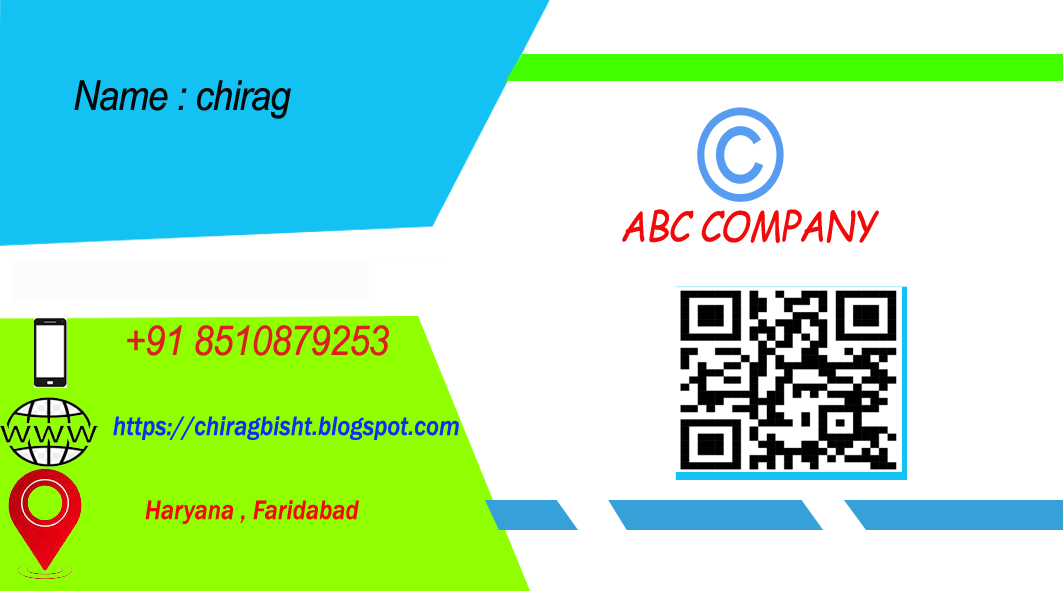
<style>
.page{position:relative;width:1063px;height:591px;background:#ffffff}
.page>*{position:absolute;margin:0}
.t1{font:41.2px "Arial-ItalicMT";letter-spacing:-0.025em;color:#090808;scale:0.89 1}
.t2{font:41.2px "ComicSansMS-Italic";letter-spacing:-0.025em;color:#f00a0a;scale:0.89 1}
.t3{font:41.2px "Arial-ItalicMT";letter-spacing:-0.025em;color:#db2020;scale:0.89 1}
.t4{font:27.5px "FranklinGothic-MediumItalic";letter-spacing:0.005em;color:#0d2ef6;scale:0.89 1}
.t5{font:27.5px "FranklinGothic-MediumItalic";letter-spacing:0.005em;color:#f60808;scale:0.89 1}
</style>
<div class="page">
<p class="t1" style="left:74px;top:80px;width:217px;height:39px">Name : chirag</p>
<p class="t2" style="left:622px;top:209px;width:257px;height:34px">ABC COMPANY</p>
<p class="t3" style="left:127px;top:325px;width:262px;height:31px">+91 8510879253</p>
<p class="t4" style="left:113px;top:416px;width:346px;height:24px">https://chiragbisht.blogspot.com</p>
<p class="t5" style="left:145px;top:500px;width:214px;height:24px">Haryana , Faridabad</p>
</div>
